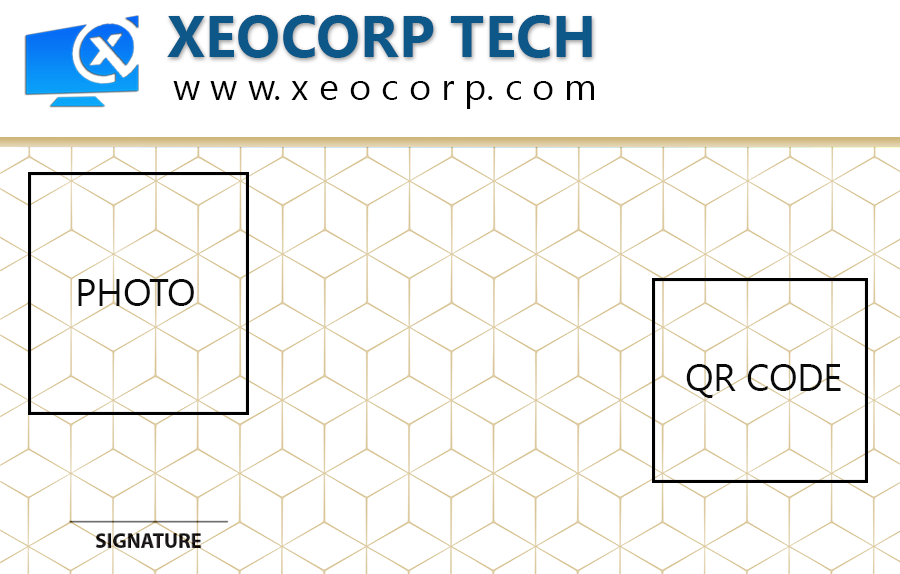
<style>
.page{position:relative;width:900px;height:574px;background:#ffffff}
.page>*{position:absolute;margin:0}
.t1{font:58.3px "Leelawadee-Bold";color:#0d5889}
.t2{font:37.5px "Leelawadee";color:#000000}
.t3{font:37.5px "Leelawadee";color:#0b0a0a}
</style>
<div class="page">
<p class="t1" style="left:167px;top:15px;width:425px;height:43px">XEOCORP TECH</p>
<p class="t2" style="left:173px;top:81px;width:421px;height:28px">w w w. x e o c o r p. c o m</p>
<p class="t3" style="left:78px;top:279px;width:116px;height:27px">PHOTO</p>
<p class="t3" style="left:686px;top:364px;width:155px;height:34px">QR CODE</p>
</div>
